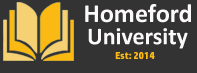
<style>
.page{position:relative;width:197px;height:73px;background:#333333}
.page>*{position:absolute;margin:0}
.t1{font:26px "Calibri-Bold";color:#fbf9f9}
.t2{font:24.3px "Calibri-Bold";color:#fbf9f9}
.t3{font:10px "HPSimplified-Bold";color:#fbb913}
</style>
<div class="page">
<p class="t1" style="left:85px;top:4px;width:106px;height:19px">Homeford</p>
<p class="t2" style="left:88px;top:28px;width:100px;height:21px">University</p>
<p class="t3" style="left:115px;top:52px;width:40px;height:7px">Est: 2014</p>
</div>
